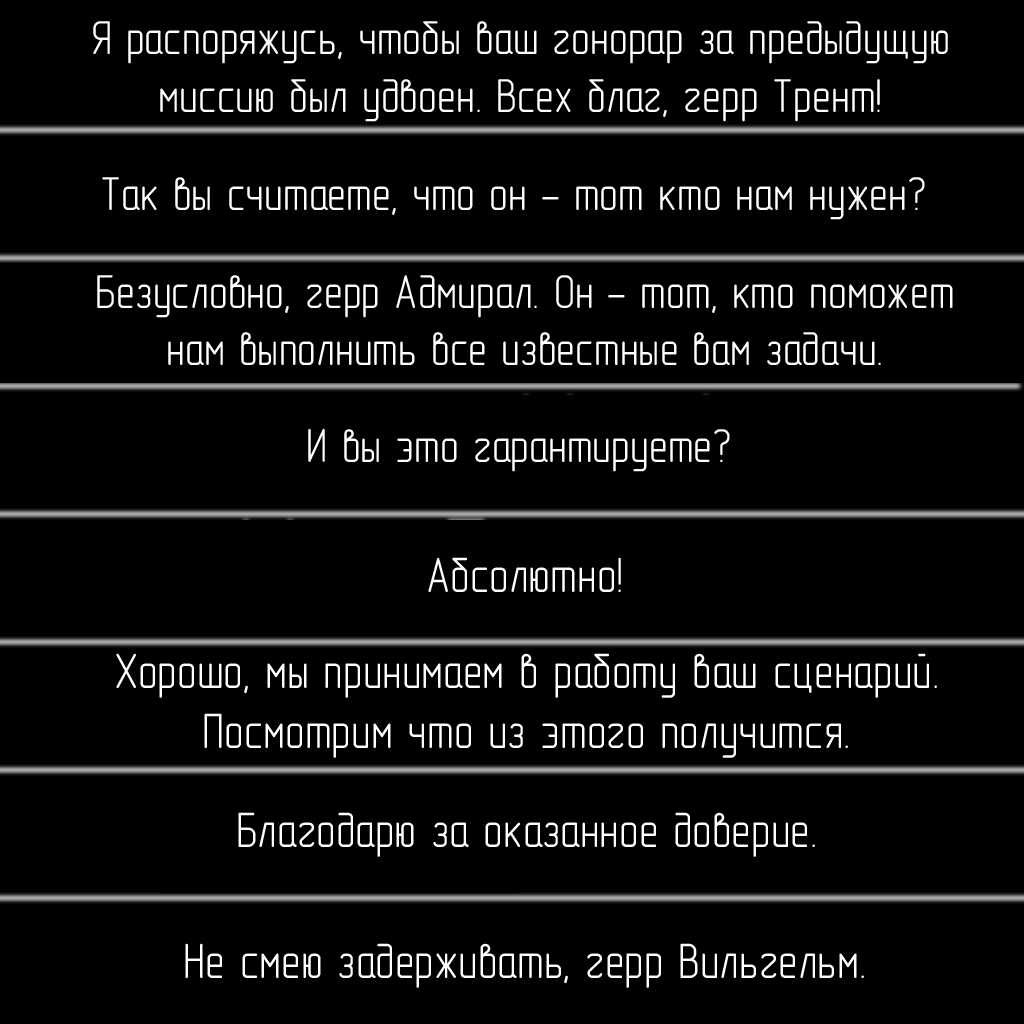
<style>
.page{position:relative;width:1024px;height:1024px;background:#000000}
.page>*{position:absolute;margin:0}
.t1{font:48px "GOST-2.304-81typeA";color:#ffffff}
.t2{font:50px "GOST-2.304-81typeA";color:#ffffff}
</style>
<div class="page">
<p class="t1" style="left:93px;top:21px;width:855px;height:101px;text-align:center">Я распоряжусь, чтобы ваш гонорар за предыдущую<br>миссию был удвоен. Всех благ, герр Трент!</p>
<p class="t1" style="left:102px;top:177px;width:823px;height:43px">Так вы считаете, что он - тот кто нам нужен?</p>
<p class="t1" style="left:97px;top:275px;width:856px;height:90px;text-align:center">Безусловно, герр Адмирал. Он - тот, кто поможет<br>нам выполнить все известные вам задачи.</p>
<p class="t1" style="left:308px;top:428px;width:422px;height:44px">И вы это гарантируете?</p>
<p class="t2" style="left:428px;top:557px;width:193px;height:35px">Абсолютно!</p>
<p class="t2" style="left:116px;top:653px;width:821px;height:105px;text-align:center">Хорошо, мы принимаем в работу ваш сценарий.<br>Посмотрим что из этого получится.</p>
<p class="t2" style="left:238px;top:812px;width:577px;height:45px">Благодарю за оказанное доверие.</p>
<p class="t2" style="left:185px;top:943px;width:679px;height:45px">Не смею задерживать, герр Вильгельм.</p>
</div>
